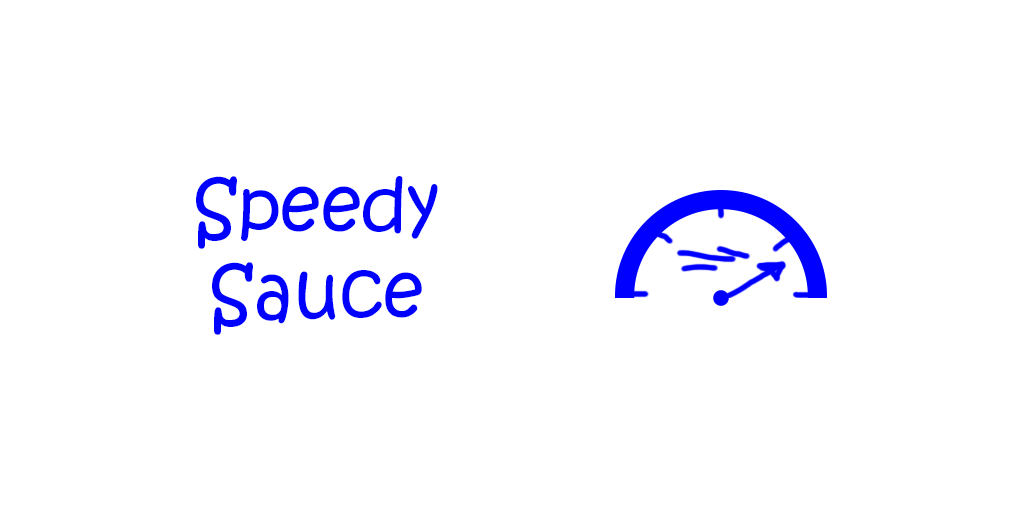
<style>
.page{position:relative;width:1024px;height:512px;background:#ffffff}
.page>*{position:absolute;margin:0}
.t1{font:72px "KristenITC-Regular";color:#0000ff}
</style>
<div class="page">
<p class="t1" style="left:196px;top:176px;width:242px;height:159px;text-align:center">Speedy<br>Sauce</p>
</div>
